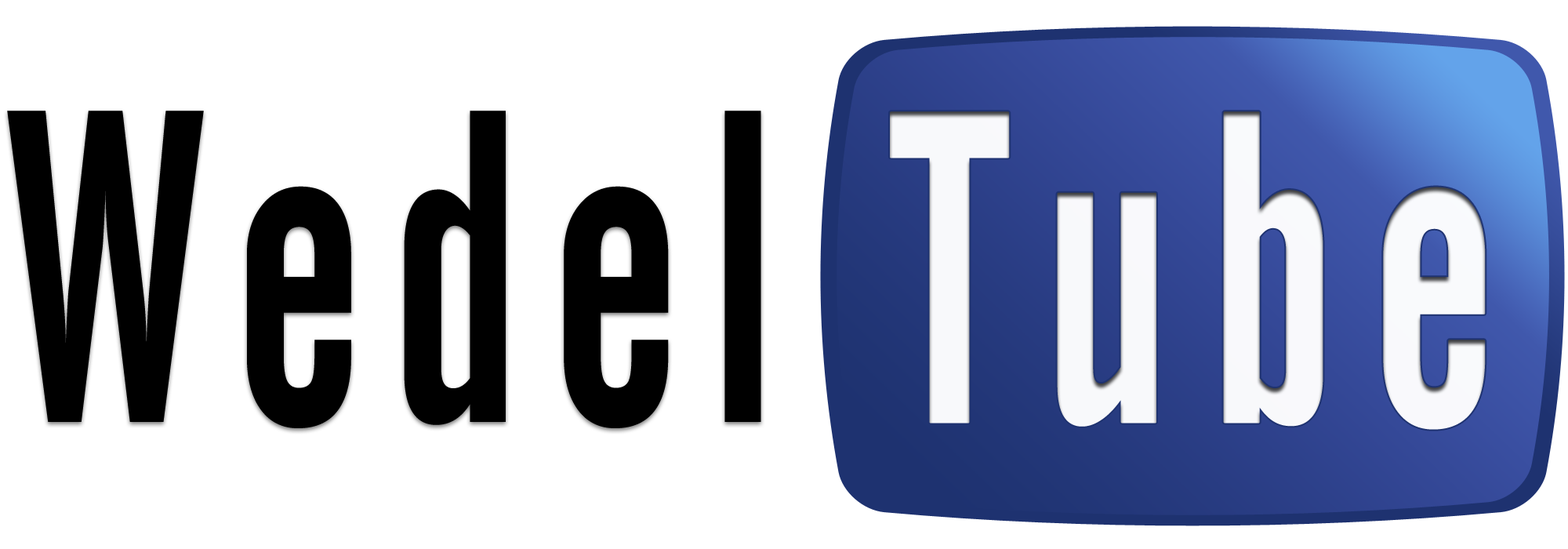
<style>
.page{position:relative;width:1568px;height:549px;background:#ffffff}
.page>*{position:absolute;margin:0}
.t1{font:440.2px "AlternateGothicNo2BT-Regular";letter-spacing:0.075em;color:#000000;scale:0.83 1}
.t2{font:438.5px "AlternateGothicNo2BT-Regular";letter-spacing:0.075em;color:#ffffff;font-weight:bold;scale:0.8 1}
.t3{font:438.5px "AlternateGothicNo2BT-Regular";letter-spacing:0.075em;color:#d2aa07;scale:0.8 1}
</style>
<div class="page">
<p class="t1" style="left:7px;top:111px;width:754px;height:317px">Wedel</p>
<p class="t2" style="left:890px;top:111px;width:596px;height:319px;opacity:0.97"><span class="t3"> </span>Tube</p>
</div>
